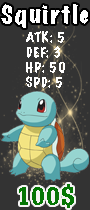
<style>
.page{position:relative;width:90px;height:210px;background:#333333}
.page>*{position:absolute;margin:0}
.t1{font:22.9px "MarkerFelt-Wide";letter-spacing:0.05em;color:#ffffff}
.t2{font:12.5px "MarkerFelt-Wide";letter-spacing:0.05em;color:#ffffff}
.t3{font:41.7px "DilleniaUPCBold";letter-spacing:0.05em;color:#057605}
</style>
<div class="page">
<p class="t1" style="left:1px;top:4px;width:87px;height:24px">Squirtle</p>
<p class="t2" style="left:26px;top:31px;width:39px;height:57px">ATK: 5<br>DEF: 3<br>HP: 50<br>SPD: 5</p>
<p class="t3" style="left:19px;top:184px;width:55px;height:24px">100$</p>
</div>
